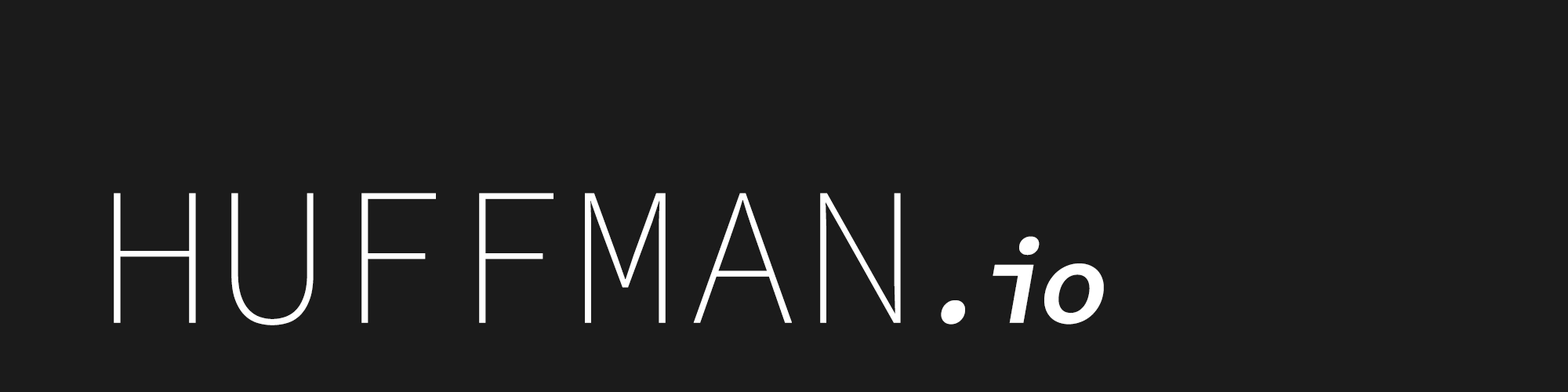
<style>
.page{position:relative;width:1568px;height:392px;background:#1b1b1b}
.page>*{position:absolute;margin:0}
.t1{font:196px "SourceCodePro-ExtraLight";color:#ffffff;text-transform:uppercase}
.t2{font:117.6px "SourceCodePro-Semibold";letter-spacing:-0.1em;color:#ffffff;font-style:italic}
</style>
<div class="page">
<p class="t1" style="left:114px;top:193px;width:787px;height:132px">Huffman</p>
<p class="t2" style="left:941px;top:236px;width:163px;height:89px">.io</p>
</div>
